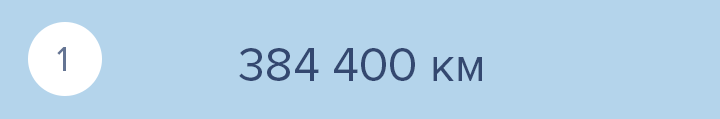
<style>
.page{position:relative;width:720px;height:119px;background:#b4d4eb}
.page>*{position:absolute;margin:0}
.t1{font:36px "ProximaNova-Regular";color:#647493}
.t2{font:48px "ProximaNova-Regular";color:#344870}
</style>
<div class="page">
<p class="t1" style="left:57px;top:47px;width:9px;height:24px">1</p>
<p class="t2" style="left:239px;top:48px;width:243px;height:33px">384 400 км</p>
</div>
